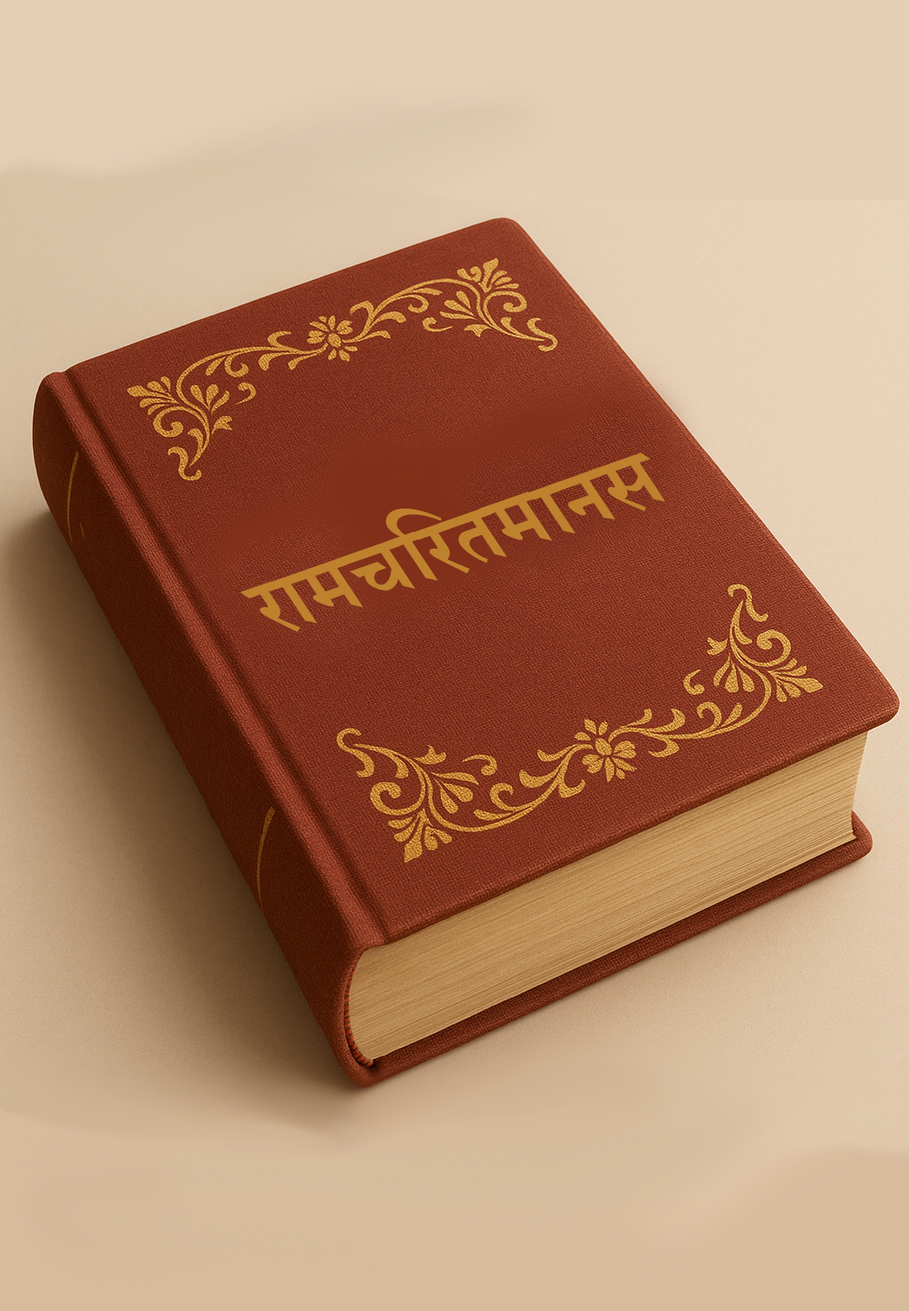
<style>
.page{position:relative;width:909px;height:1311px}
.page>*{position:absolute;margin:0}
.t1{font:114.2px "Kokila-Bold";color:#be812e;scale:0.88 1}
</style>
<div class="page">
<p class="t1" style="left:240px;top:453px;width:426px;height:179px;rotate:-19deg">रामचिरतमानस</p>
</div>
